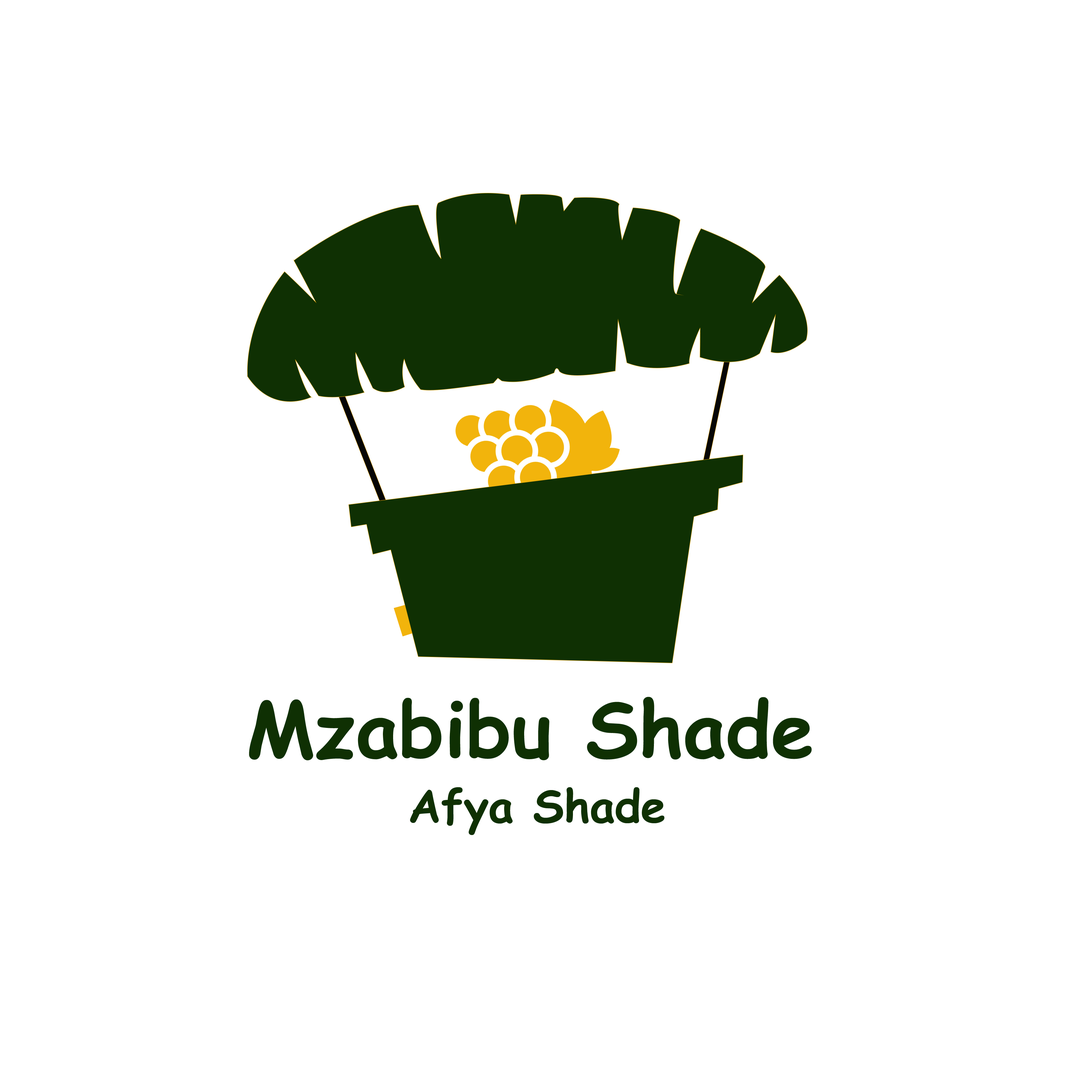
<style>
.page{position:relative;width:1092px;height:1092px;background:#ffffff}
.page>*{position:absolute;margin:0}
.t1{font:77.1px "ComicSansMS-Bold";color:#0f3003}
.t2{font:44.8px "ComicSansMS-Bold";color:#0f3003}
</style>
<div class="page">
<p class="t1" style="left:249px;top:697px;width:563px;height:63px">Mzabibu Shade</p>
<p class="t2" style="left:410px;top:787px;width:254px;height:48px">Afya Shade</p>
</div>
